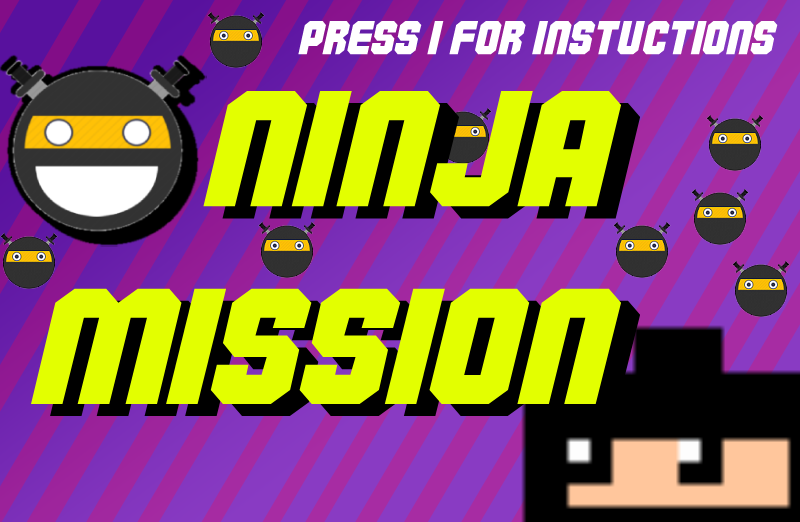
<style>
.page{position:relative;width:800px;height:522px}
.page>*{position:absolute;margin:0}
.t1{font:47.6px "Commando";color:#ffffff}
.t2{font:164.7px "Commando";color:#e3ff00;scale:1.08 1}
.t3{font:164.7px "Commando";scale:1.08 1}
</style>
<div class="page">
<p class="t1" style="left:298px;top:20px;width:480px;height:35px">Press I for instuctions</p>
<p class="t2" style="left:31px;top:91px;width:590px;height:313px;text-align:right">NINJA<br>MISSION</p>
<p class="t3" style="left:50px;top:103px;width:591px;height:313px;text-align:right">NINJA<br>MISSION</p>
</div>
